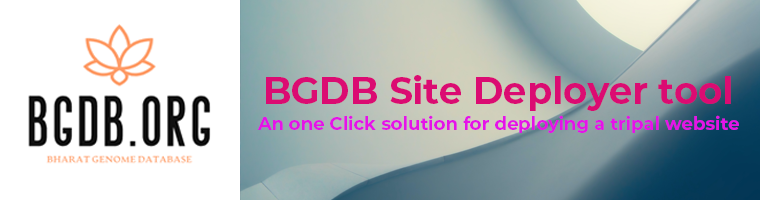
<style>
.page{position:relative;width:760px;height:200px;background:#ffffff}
.page>*{position:absolute;margin:0}
.t1{font:37px "Montserrat-Bold";color:#db0b72}
.t2{font:18px "Montserrat-Bold";color:#e513e8}
</style>
<div class="page">
<p class="t1" style="left:266px;top:75px;width:465px;height:36px">BGDB Site Deployer tool</p>
<p class="t2" style="left:257px;top:115px;width:482px;height:18px">An one Click solution for deploying a tripal website</p>
</div>
